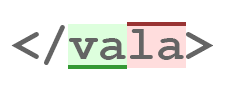
<style>
.page{position:relative;width:230px;height:88px;background:#ffffff}
.page>*{position:absolute;margin:0}
.t1{font:48px "CourierNewPS-BoldMT";color:#646464}
</style>
<div class="page">
<p class="t1" style="left:11px;top:25px;width:202px;height:40px">&lt;/vala&gt;</p>
</div>
